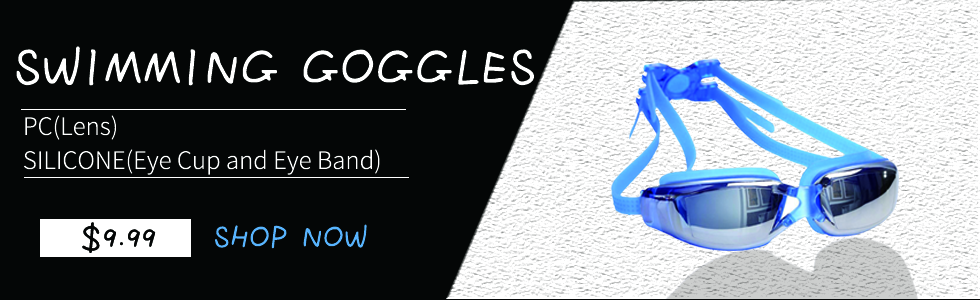
<style>
.page{position:relative;width:980px;height:300px;background:#040606}
.page>*{position:absolute;margin:0}
.t1{font:60px "FZMWJW--GB1-0";color:#ffffff}
.t2{font:60px "FZMWJW--GB1-0";letter-spacing:0.1em;color:#ffffff}
.t3{font:24px/34px "SourceHanSansCN-Light";color:#ffffff}
.t4{font:35.4px "FZMWJW--GB1-0";color:#040606}
.t5{font:35.8px "FZMWJW--GB1-0";color:#58b4ff}
</style>
<div class="page">
<p class="t1" style="left:16px;top:46px;width:518px;height:40px">SWIMMING GOGGLE<span class="t2">S</span></p>
<p class="t3" style="left:24px;top:115px;width:356px;height:60px">PC(Lens)<br>SILICONE(Eye Cup and Eye Band)</p>
<p class="t4" style="left:82px;top:222px;width:74px;height:31px">$9.99</p>
<p class="t5" style="left:215px;top:224px;width:152px;height:25px">SHOP NOW</p>
</div>
